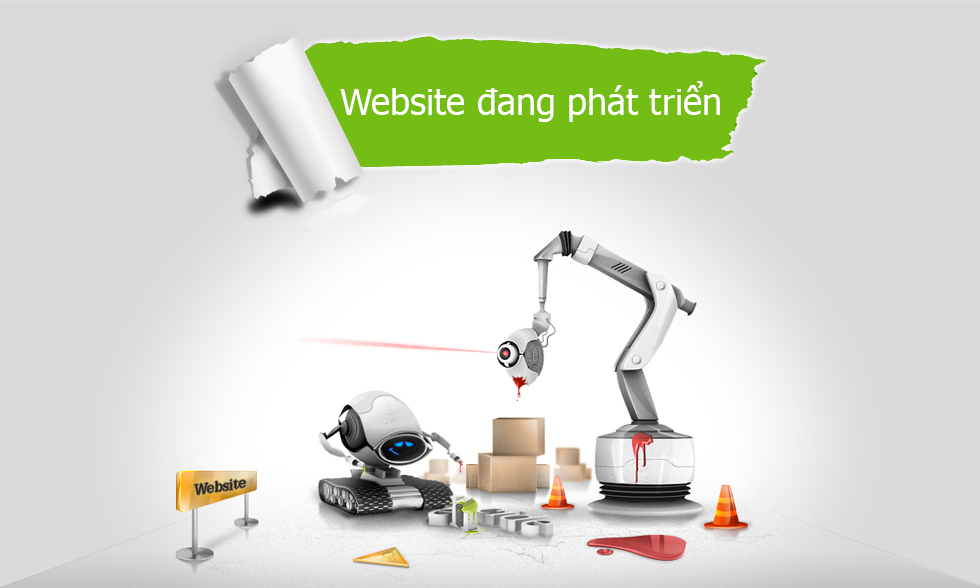
<style>
.page{position:relative;width:980px;height:588px;background:#dadada}
.page>*{position:absolute;margin:0}
.t1{font:36px "Tahoma";color:#ffffff}
</style>
<div class="page">
<p class="t1" style="left:340px;top:81px;width:380px;height:41px">Website đang phát triển</p>
</div>
